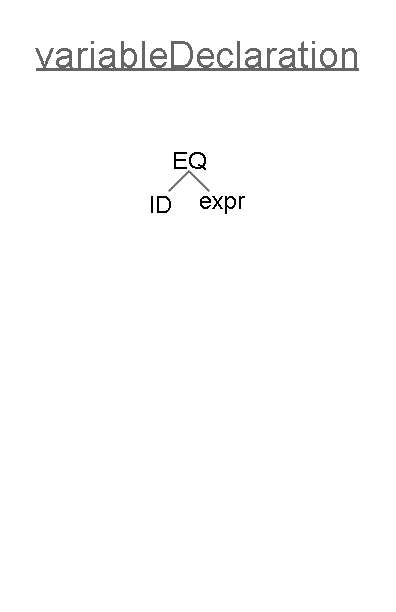
<style>
.page{position:relative;width:396px;height:612px;background:#ffffff}
.page>*{position:absolute;margin:0}
.t1{font:38px "ArialMT";color:#666666}
.t2{font:12px "ArialMT";color:#000000}
</style>
<div class="page">
<p class="t1" style="left:35px;top:41px;width:322px;height:27px">variableDeclaration</p>
<p class="t2" style="left:174px;top:152px;width:32px;height:18px">EQ</p>
<p class="t2" style="left:151px;top:196px;width:20px;height:17px">ID</p>
<p class="t2" style="left:200px;top:196px;width:45px;height:18px">expr</p>
</div>
